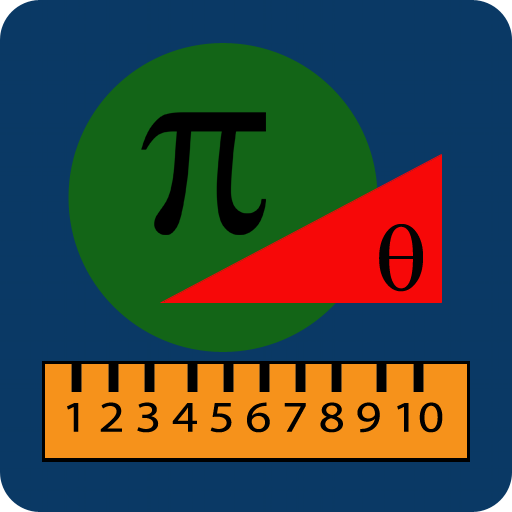
<style>
.page{position:relative;width:512px;height:512px;background:#0a3965}
.page>*{position:absolute;margin:0}
.t1{font:95px "TimesNewRomanPSMT";color:#030303;scale:1.15 1}
.t2{font:44px "MyriadPro-Regular";color:#000000;scale:1.15 1}
</style>
<div class="page">
<p class="t1" style="left:379px;top:224px;width:44px;height:68px">θ</p>
<p class="t2" style="left:67px;top:402px;width:376px;height:31px">1 2 3 4 5 6 7 8 9 10</p>
</div>
